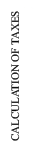
<style>
.page{position:relative;width:35px;height:151px;background:#ffffff}
.page>*{position:absolute;margin:0}
.t1{font:11px "TimesNewRomanPSMT";color:#0c0c0c}
</style>
<div class="page">
<p class="t1" style="left:11px;top:11px;width:9px;height:130px;rotate:-90deg">CALCULATION OF TAXES</p>
</div>
